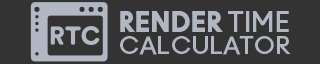
<style>
.page{position:relative;width:320px;height:64px;background:#333333}
.page>*{position:absolute;margin:0}
.t1{font:27.4px "AnoBlack-Regular";color:#b1b7c3;text-transform:uppercase}
.t2{font:27.4px "AnoBold-Regular";color:#b1b7c3;text-transform:uppercase}
.t3{font:23.9px "AnoBold-Regular";color:#b1b7c3;text-transform:uppercase}
</style>
<div class="page">
<p class="t1" style="left:120px;top:11px;width:169px;height:22px">render <span class="t2">time</span></p>
<p class="t3" style="left:120px;top:36px;width:171px;height:19px">calculator</p>
</div>
